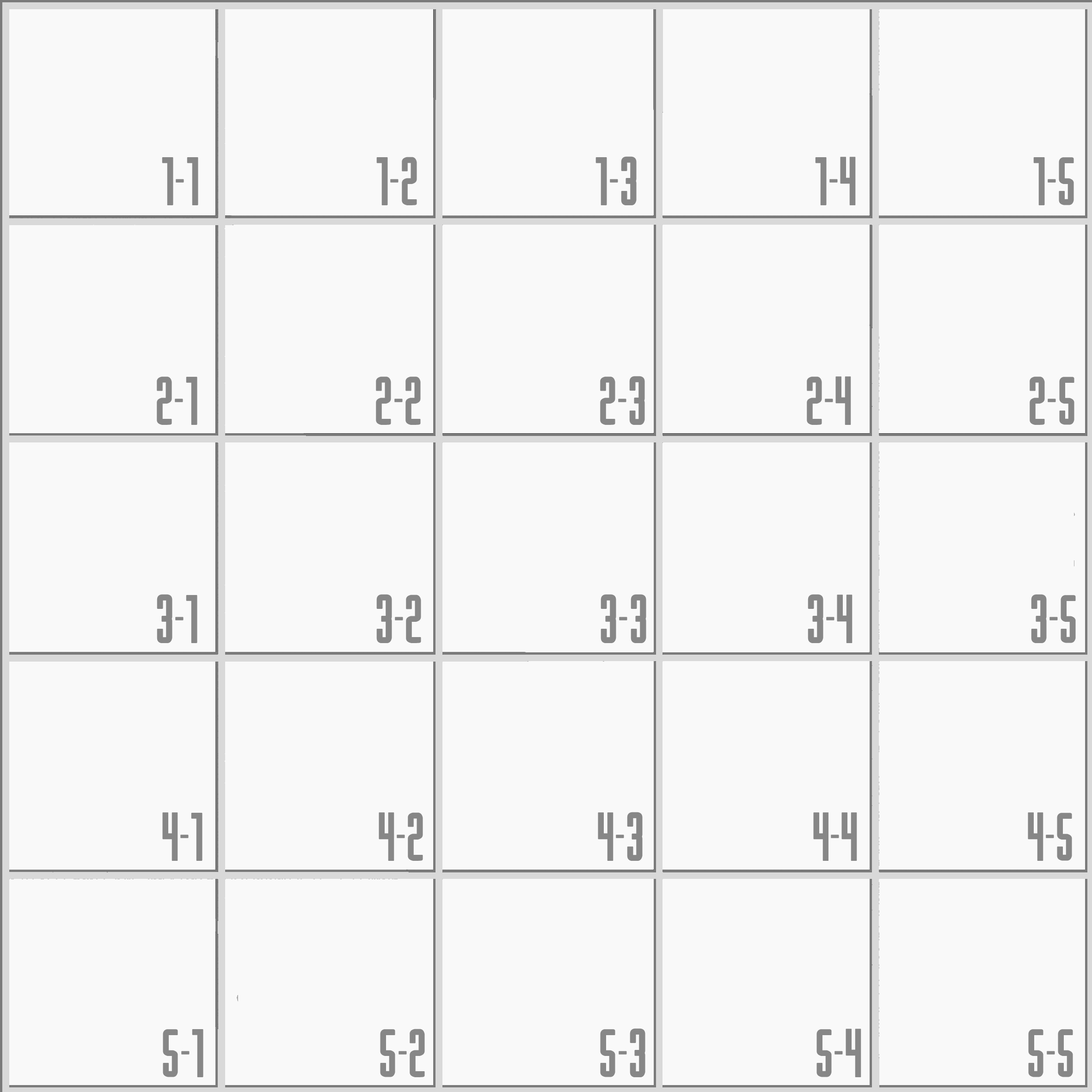
<style>
.page{position:relative;width:1092px;height:1092px;background:#f9f9f9}
.page>*{position:absolute;margin:0}
.t1{font:71px "Rainbow";color:#878787}
.t2{font:32.6px "Rainbow";color:#878787}
</style>
<div class="page">
<p class="t1" style="left:162px;top:156px;width:912px;height:49px">1-1          1-2          1-3          1-4          1-5</p>
<p class="t1" style="left:157px;top:376px;width:917px;height:49px">2-1          2-2          2-3         2-4          2-5</p>
<p class="t1" style="left:157px;top:594px;width:919px;height:49px">3-1          3-2          3-3         3-4          3-5</p>
<p class="t1" style="left:162px;top:812px;width:910px;height:49px"><span class="t2"> </span>4-1          4-2          4-3          4-4          4-5</p>
<p class="t1" style="left:163px;top:1028px;width:910px;height:49px"><span class="t2"> </span>5-1          5-2          5-3          5-4          5-5</p>
</div>
